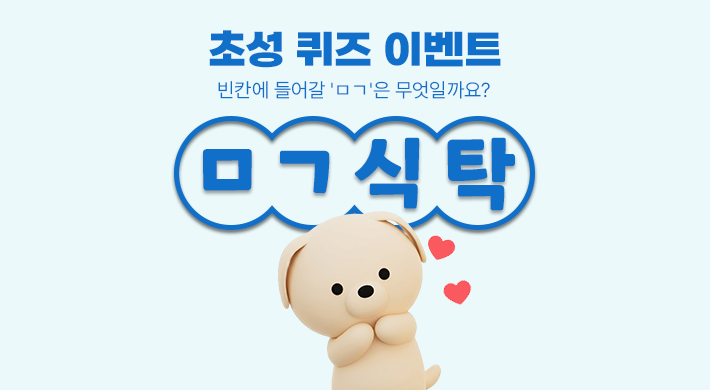
<style>
.page{position:relative;width:710px;height:390px;background:#ebf9fb}
.page>*{position:absolute;margin:0}
.t1{font:40px "SBAggroB";color:#106fc9}
.t2{font:20px "Pretendard-Light";color:#106fc9}
.t3{font:80px "ONEMobilePOPRegular";letter-spacing:0.24em;color:#106fc9}
</style>
<div class="page">
<p class="t1" style="left:209px;top:30px;width:292px;height:38px">초성 퀴즈 이벤트</p>
<p class="t2" style="left:218px;top:81px;width:272px;height:18px">빈칸에 들어갈 'ㅁㄱ'은 무엇일까요?</p>
<p class="t3" style="left:203px;top:137px;width:312px;height:74px">ㅁㄱ식탁</p>
</div>
